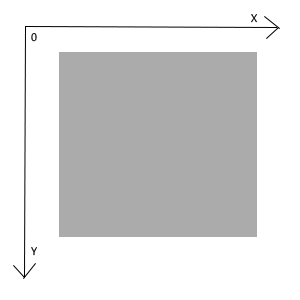
<style>
.page{position:relative;width:300px;height:300px;background:#ffffff}
.page>*{position:absolute;margin:0}
.t1{font:11px "MicrosoftPhagsPa"}
</style>
<div class="page">
<p class="t1" style="left:251px;top:14px;width:6px;height:9px">X</p>
<p class="t1" style="left:31px;top:33px;width:6px;height:9px">0</p>
<p class="t1" style="left:31px;top:247px;width:6px;height:9px">Y</p>
</div>
